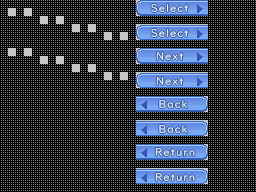
<style>
.page{position:relative;width:256px;height:192px;background:#000000}
.page>*{position:absolute;margin:0}
.t1{font:10.7px/24px "UDDigiKyokashoNK";letter-spacing:0.1em;color:#e2eeff}
.t2{font:10.7px/23.3px "UDDigiKyokashoNK";letter-spacing:0.1em;color:#e2eeff}
</style>
<div class="page">
<p class="t1" style="left:151px;top:3px;width:44px;height:178px;text-align:center"><span class="t2">Select<br></span>Select<br>Next<br>Next<br>  Back<br>  Back<br>   Return<br>   Return</p>
</div>
